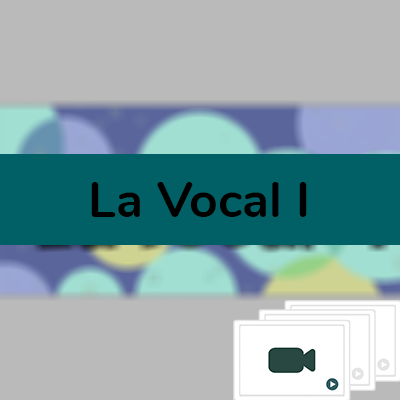
<style>
.page{position:relative;width:400px;height:400px;background:#bababa}
.page>*{position:absolute;margin:0}
.t1{font:50px "Nunito-Bold";color:#000000}
</style>
<div class="page">
<p class="t1" style="left:91px;top:182px;width:216px;height:35px">La Vocal I</p>
</div>
